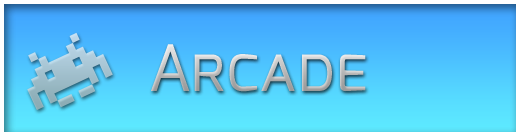
<style>
.page{position:relative;width:520px;height:136px}
.page>*{position:absolute;margin:0}
.t1{font:64px "Exo-Regular";font-variant:small-caps}
</style>
<div class="page">
<p class="t1" style="left:151px;top:44px;width:215px;height:48px">Arcade</p>
</div>
